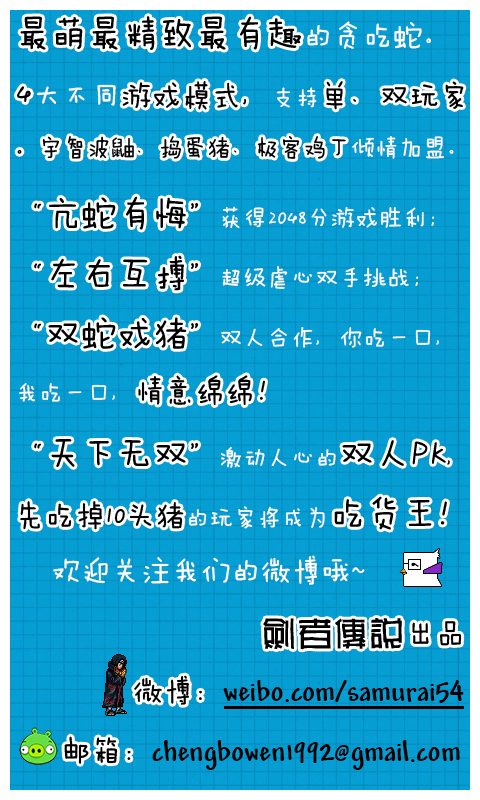
<style>
.page{position:relative;width:480px;height:800px;background:#069dd3}
.page>*{position:absolute;margin:0}
.t1{font:30px/60px "Andy-Bold";color:#010101}
.t2{font:36px/60px "FZMWJW--GB1-0";color:#ffffff}
.t3{font:30px/60px "FZMWJW--GB1-0";color:#ffffff}
.t4{font:24px/60px "FZMWJW--GB1-0";color:#ffffff}
.t5{font:36px/60px "¶®§{¬ü¤u02";color:#ffffff}
.t6{font:30px/60px "FZMWJW--GB1-0";color:#000000}
.t7{font:30px/60px "Andy-Bold";color:#000000}
.t8{font:30px/60px "FZMWJW--GB1-0";color:#010101}
</style>
<div class="page">
<p class="t1" style="left:17px;top:16px;width:447px;height:754px"><span class="t2">最萌最精致最有趣</span><span class="t3">的贪吃蛇。<br></span><span class="t2">4</span><span class="t3">大不同游戏模式，</span><span class="t4">支持</span><span class="t3">单、双玩家</span><span class="t4">。宇智波鼬、捣蛋猪、极客鸡丁倾情加盟。<br></span><span class="t3">“</span><span class="t2">亢蛇有悔</span><span class="t3">”</span><span class="t4">获得2048分游戏胜利；<br></span><span class="t3">“</span><span class="t2">左右互搏</span><span class="t3">”</span><span class="t4">超级虐心双手挑战；<br></span><span class="t3">“</span><span class="t2">双蛇戏猪</span><span class="t3">”</span><span class="t4">双人合作，你吃一口，我吃一口，</span><span class="t3">情意绵绵！<br>“</span><span class="t2">天下无双</span><span class="t3">”</span><span class="t4">激动人心的</span><span class="t2">双人PK</span><span class="t4">,</span><span class="t3">先吃掉10头猪</span><span class="t4">的玩家将成为</span><span class="t2">吃货王!<br></span><span class="t3"> 欢迎关注我们的微博哦~<br>                       </span><span class="t5">劍者傳說</span><span class="t3">出品<br>           </span><span class="t6">微博：</span><span class="t7">weibo.com/samurai54<br>  </span><span class="t8">邮箱：</span>chengbowen1992@gmail.com</p>
</div>
